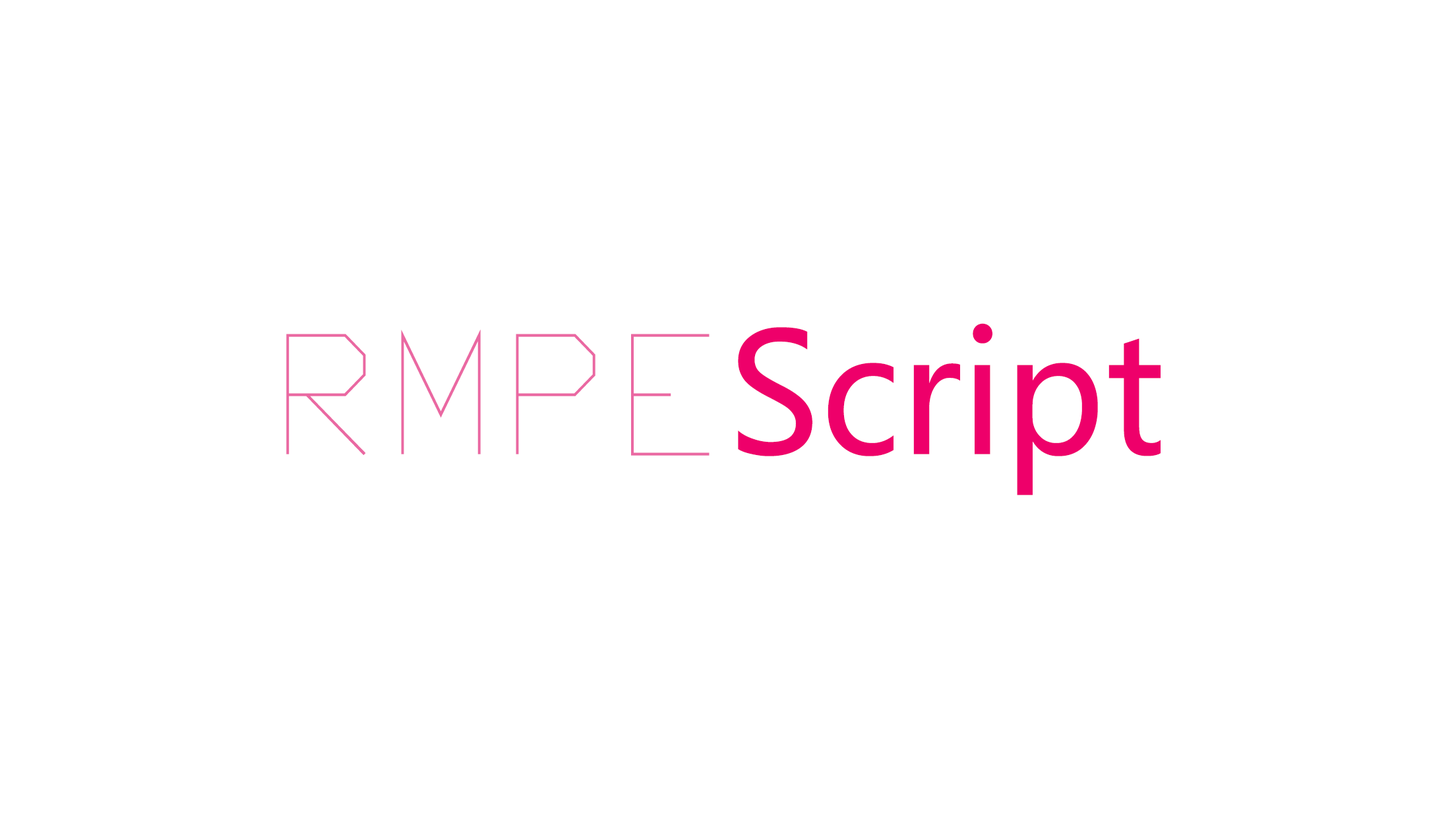
<style>
.page{position:relative;width:1456px;height:819px;background:#ffffff}
.page>*{position:absolute;margin:0}
.t1{font:164.9px "MicrosoftYaHeiUI";color:#ee006a;scale:0.97 1}
.t2{font:164.9px "Proxy7";color:#ea68a2;scale:0.97 1}
</style>
<div class="page">
<p class="t1" style="left:286px;top:323px;width:875px;height:172px"><span class="t2">RMPE</span>Script</p>
</div>
